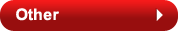
<style>
.page{position:relative;width:178px;height:31px;background:#980e0e}
.page>*{position:absolute;margin:0}
.t1{font:16px "Arial-BoldMT";letter-spacing:0.014em;color:#ffffff}
</style>
<div class="page">
<p class="t1" style="left:16px;top:8px;width:43px;height:13px">Other</p>
</div>
